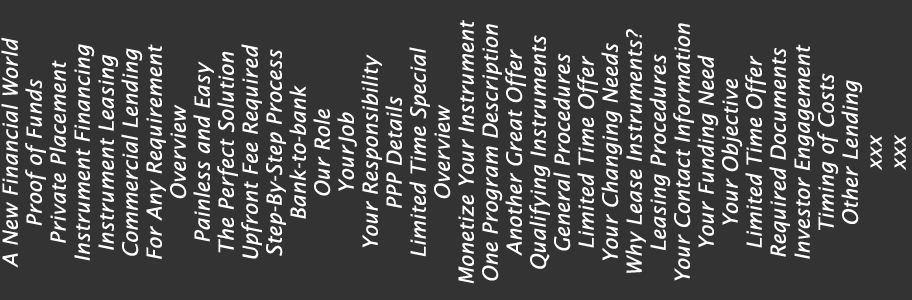
<style>
.page{position:relative;width:912px;height:300px;background:#333333}
.page>*{position:absolute;margin:0}
.t1{font:21px/24px "LucidaSans-Italic";color:#ffffff}
</style>
<div class="page">
<p class="t1" style="left:1px;top:20px;width:905px;height:264px;text-align:center;rotate:-90deg">A New Financial World<br>Proof of Funds<br>Private Placement <br>Instrument Financing<br>Instrument Leasing<br>Commercial Lending<br>For Any Requirement<br>Overview<br>Painless and Easy<br>The Perfect Solution<br>Upfront Fee Required<br>Step-By-Step Process<br>Bank-to-bank<br>Our Role<br>YourJob<br>Your Responsibility<br>PPP Details<br>Limited Time Special<br>Overview<br>Monetize Your Instrument<br>One Program Description<br>Another Great Offer<br>Qualifying Instruments<br>General Procedures<br>Limited Time Offer<br>Your Changing Needs<br>Why Lease Instruments?<br>Leasing Procedures<br>Your Contact Information<br>Your Funding Need<br>Your Objective<br>Limited Time Offer<br>Required Documents<br>Investor Engagement<br>Timing of Costs<br>Other Lending<br>xxx<br>xxx</p>
</div>
